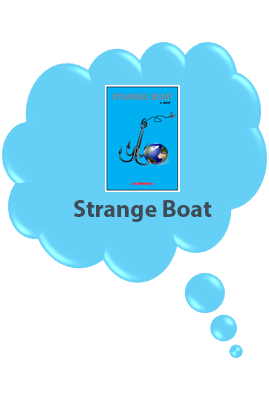
<style>
.page{position:relative;width:269px;height:400px;background:#ffffff}
.page>*{position:absolute;margin:0}
.t1{font:24px "MyriadPro-Bold";color:#3f4b55}
</style>
<div class="page">
<p class="t1" style="left:74px;top:200px;width:138px;height:22px">Strange Boat</p>
</div>
